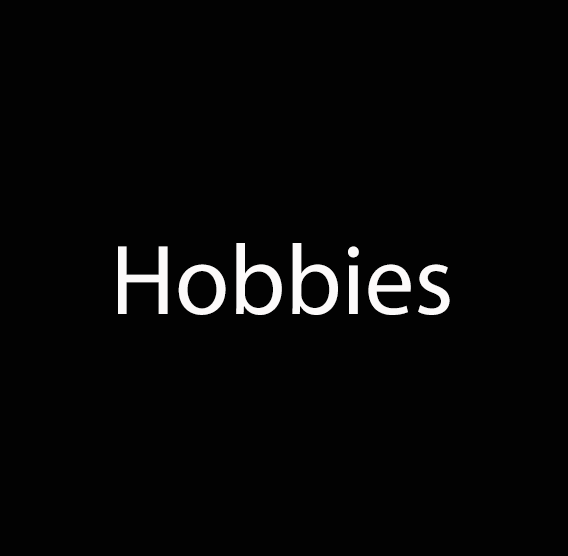
<style>
.page{position:relative;width:568px;height:556px;background:#020202}
.page>*{position:absolute;margin:0}
.t1{font:100px "MyriadPro-Regular";color:#fcfafa}
</style>
<div class="page">
<p class="t1" style="left:118px;top:243px;width:332px;height:72px">Hobbies</p>
</div>
